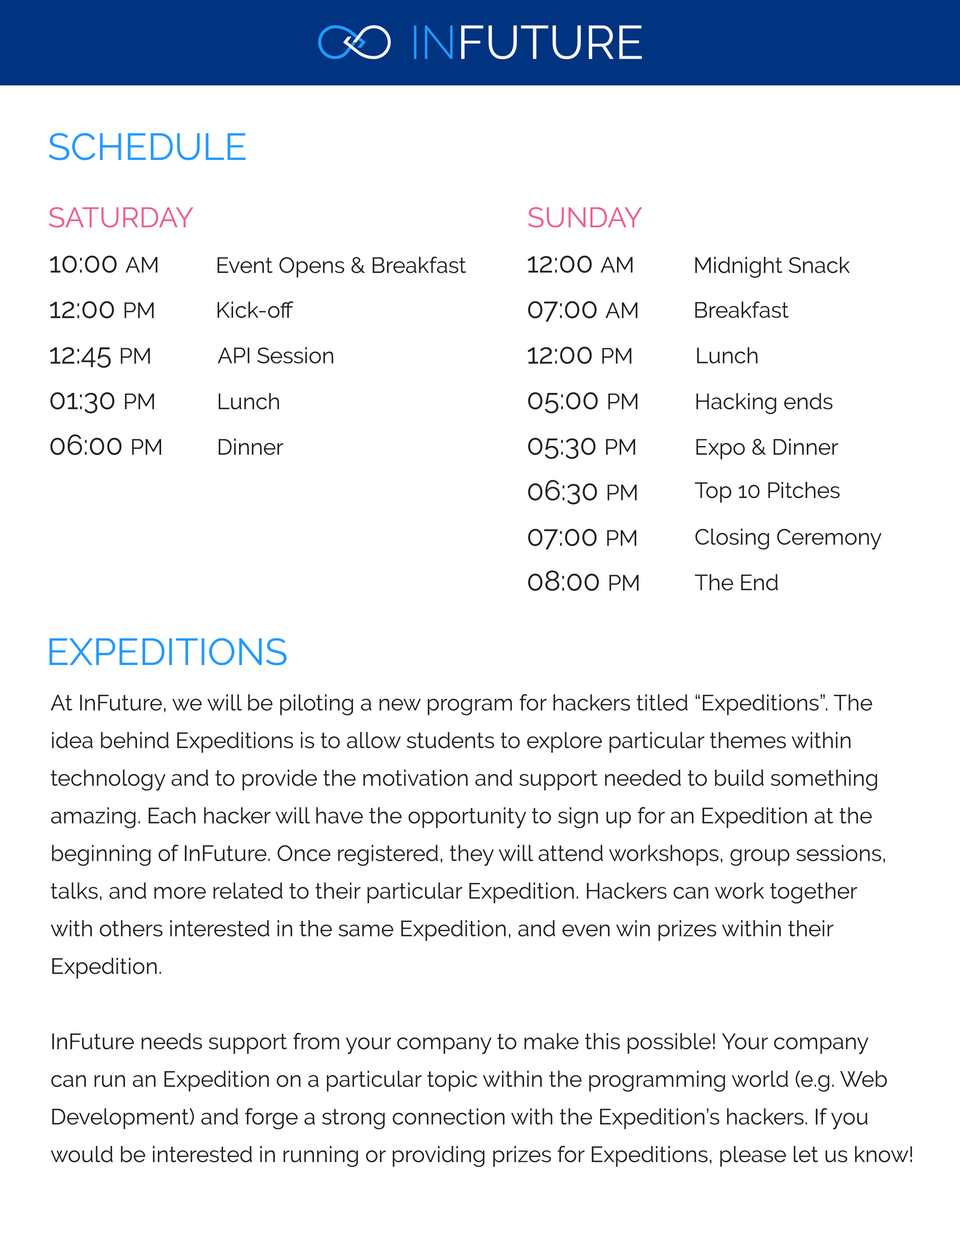
<style>
.page{position:relative;width:960px;height:1242px;background:#ffffff}
.page>*{position:absolute;margin:0}
.t1{font:47.1px "Raleway-Regular";color:#f7f7f7}
.t2{font:47.1px "Raleway-Light";color:#229aff}
.t3{font:37.6px "Raleway-Regular";color:#229aff}
.t4{font:28.2px "Raleway-Regular";color:#ef5d93}
.t5{font:28.2px "Raleway-Regular";color:#222222}
.t6{font:22px "Raleway-Regular";color:#222222}
.t7{font:22px/37.6px "Raleway-Regular";color:#222222}
</style>
<div class="page">
<p class="t1" style="left:414px;top:25px;width:228px;height:34px"><span class="t2">IN</span>FUTURE</p>
<p class="t3" style="left:49px;top:133px;width:197px;height:27px">SCHEDULE</p>
<p class="t4" style="left:49px;top:207px;width:144px;height:21px">SATURDAY</p>
<p class="t4" style="left:528px;top:207px;width:114px;height:21px">SUNDAY</p>
<p class="t5" style="left:50px;top:256px;width:107px;height:17px">10:00 <span class="t6">AM</span></p>
<p class="t6" style="left:218px;top:256px;width:248px;height:22px">Event Opens &amp; Breakfast</p>
<p class="t5" style="left:528px;top:256px;width:104px;height:17px">12:00 <span class="t6">AM</span></p>
<p class="t6" style="left:695px;top:257px;width:155px;height:21px">Midnight Snack</p>
<p class="t5" style="left:50px;top:301px;width:104px;height:17px">12:00 <span class="t6">PM</span></p>
<p class="t6" style="left:218px;top:301px;width:76px;height:17px">Kick-off</p>
<p class="t5" style="left:528px;top:301px;width:109px;height:21px">07:00 <span class="t6">AM</span></p>
<p class="t6" style="left:695px;top:301px;width:94px;height:17px">Breakfast</p>
<p class="t5" style="left:50px;top:347px;width:100px;height:21px">12:45 <span class="t6">PM</span></p>
<p class="t6" style="left:218px;top:347px;width:115px;height:17px">API Session</p>
<p class="t5" style="left:528px;top:347px;width:103px;height:17px">12:00 <span class="t6">PM</span></p>
<p class="t6" style="left:697px;top:347px;width:60px;height:17px">Lunch</p>
<p class="t5" style="left:50px;top:392px;width:104px;height:22px">01:30 <span class="t6">PM</span></p>
<p class="t6" style="left:219px;top:393px;width:60px;height:17px">Lunch</p>
<p class="t5" style="left:528px;top:392px;width:109px;height:22px">05:00 <span class="t6">PM</span></p>
<p class="t6" style="left:696px;top:393px;width:137px;height:21px">Hacking ends</p>
<p class="t5" style="left:50px;top:434px;width:111px;height:21px">06:00 <span class="t6">PM</span></p>
<p class="t5" style="left:528px;top:438px;width:107px;height:21px">05:30 <span class="t6">PM</span></p>
<p class="t6" style="left:219px;top:439px;width:64px;height:16px">Dinner</p>
<p class="t6" style="left:696px;top:439px;width:142px;height:21px">Expo &amp; Dinner</p>
<p class="t5" style="left:528px;top:480px;width:109px;height:25px">06:30 <span class="t6">PM</span></p>
<p class="t6" style="left:695px;top:482px;width:145px;height:21px">Top 10 Pitches</p>
<p class="t5" style="left:528px;top:529px;width:108px;height:21px">07:00 <span class="t6">PM</span></p>
<p class="t6" style="left:695px;top:529px;width:187px;height:21px">Closing Ceremony</p>
<p class="t5" style="left:528px;top:570px;width:110px;height:21px">08:00 <span class="t6">PM</span></p>
<p class="t6" style="left:695px;top:574px;width:83px;height:17px">The End</p>
<p class="t3" style="left:49px;top:638px;width:237px;height:28px">EXPEDITIONS</p>
<p class="t7" style="left:50px;top:694px;width:862px;height:473px">At InFuture, we will be piloting a new program for hackers titled “Expeditions”. The<br>idea behind Expeditions is to allow students to explore particular themes within<br>technology and to provide the motivation and support needed to build something<br>amazing. Each hacker will have the opportunity to sign up for an Expedition at the<br>beginning of InFuture. Once registered, they will attend workshops, group sessions,<br>talks, and more related to their particular Expedition. Hackers can work together<br>with others interested in the same Expedition, and even win prizes within their<br>Expedition.<br><br>InFuture needs support from your company to make this possible! Your company<br>can run an Expedition on a particular topic within the programming world (e.g. Web<br>Development) and forge a strong connection with the Expedition’s hackers. If you<br>would be interested in running or providing prizes for Expeditions, please let us know!</p>
</div>
